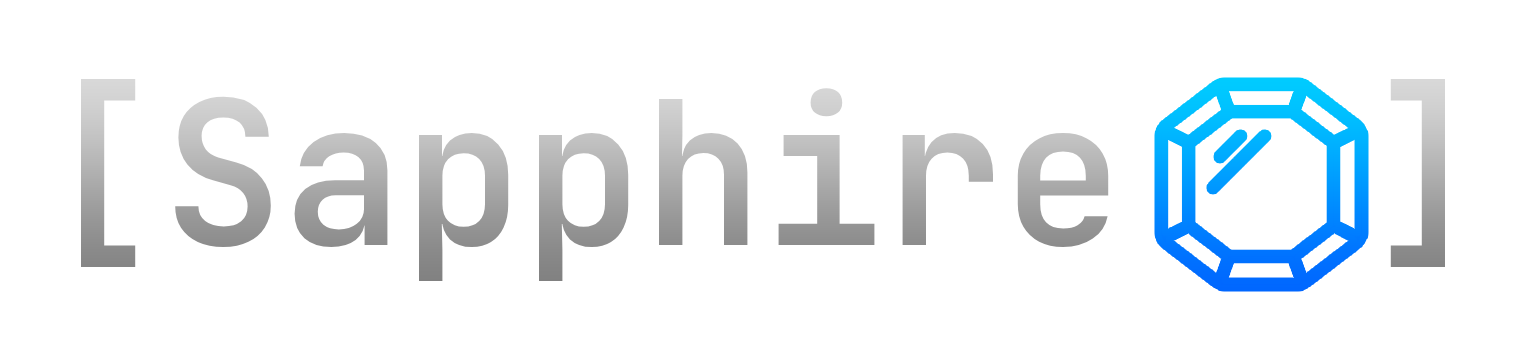
<style>
.page{position:relative;width:1536px;height:360px;background:#ffffff}
.page>*{position:absolute;margin:0}
.t1{font:200px "JetBrainsMono-SemiBold"}
</style>
<div class="page">
<p class="t1" style="left:81px;top:79px;width:1364px;height:202px">[Sapphire  ]</p>
</div>
